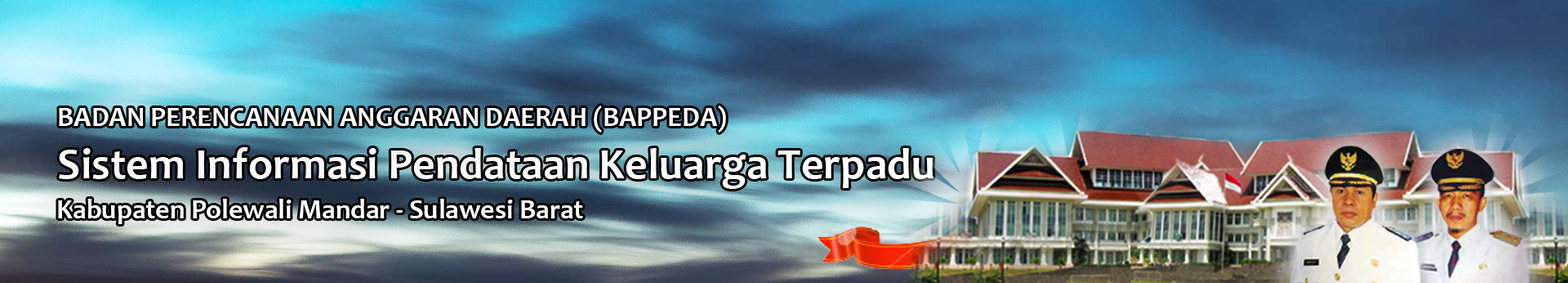
<style>
.page{position:relative;width:1568px;height:283px}
.page>*{position:absolute;margin:0}
.t1{font:27.6px "Candara-Bold";color:#ffffff}
.t2{font:44.3px "Candara-Bold";color:#ffffff}
</style>
<div class="page">
<p class="t1" style="left:59px;top:105px;width:667px;height:27px">BADAN PERENCANAAN ANGGARAN DAERAH (BAPPEDA)</p>
<p class="t2" style="left:59px;top:147px;width:874px;height:42px">Sistem Informasi Pendataan Keluarga Terpadu</p>
<p class="t1" style="left:58px;top:198px;width:525px;height:26px">Kabupaten Polewali Mandar - Sulawesi Barat</p>
</div>
